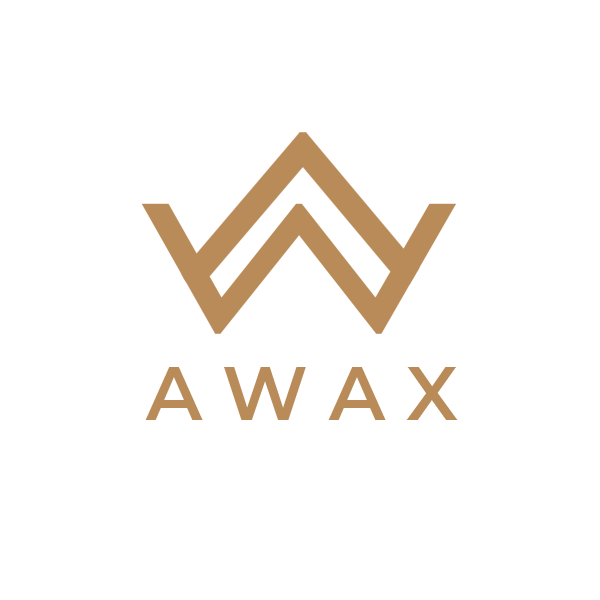
<style>
.page{position:relative;width:600px;height:600px;background:#ffffff}
.page>*{position:absolute;margin:0}
.t1{font:75px "Montserrat-SemiBold";color:#b98b59}
</style>
<div class="page">
<p class="t1" style="left:145px;top:367px;width:313px;height:53px">A W A X</p>
</div>
